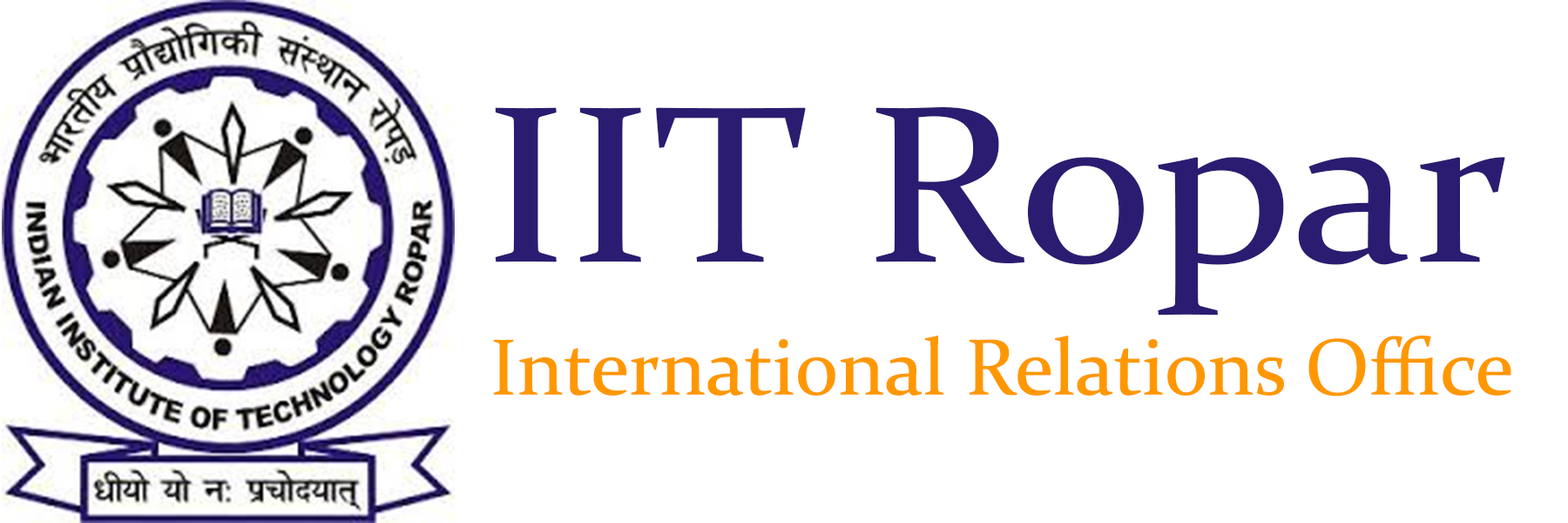
<style>
.page{position:relative;width:1568px;height:523px;background:#ffffff}
.page>*{position:absolute;margin:0}
.t1{font:225px "Constantia";color:#2b1c71;scale:1.11 1}
.t2{font:79.9px "Constantia";color:#ff9800}
</style>
<div class="page">
<p class="t1" style="left:495px;top:107px;width:1010px;height:208px">IIT Ropar</p>
<p class="t2" style="left:493px;top:335px;width:1018px;height:61px">International Relations Office</p>
</div>
